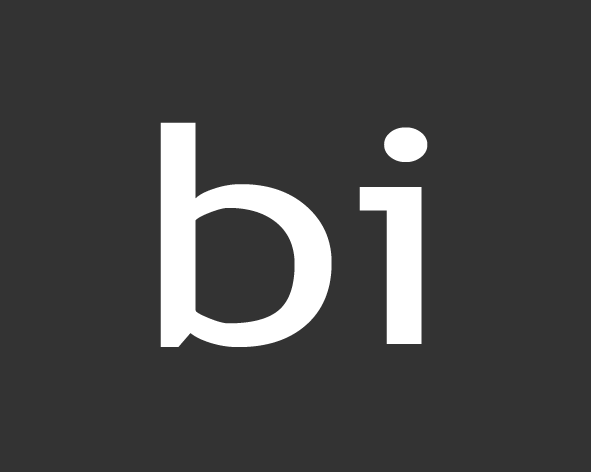
<style>
.page{position:relative;width:591px;height:472px;background:#333333}
.page>*{position:absolute;margin:0}
.t1{font:300px "TrebuchetMS";color:#ffffff;scale:1.25 1}
</style>
<div class="page">
<p class="t1" style="left:160px;top:122px;width:268px;height:225px">bi</p>
</div>
